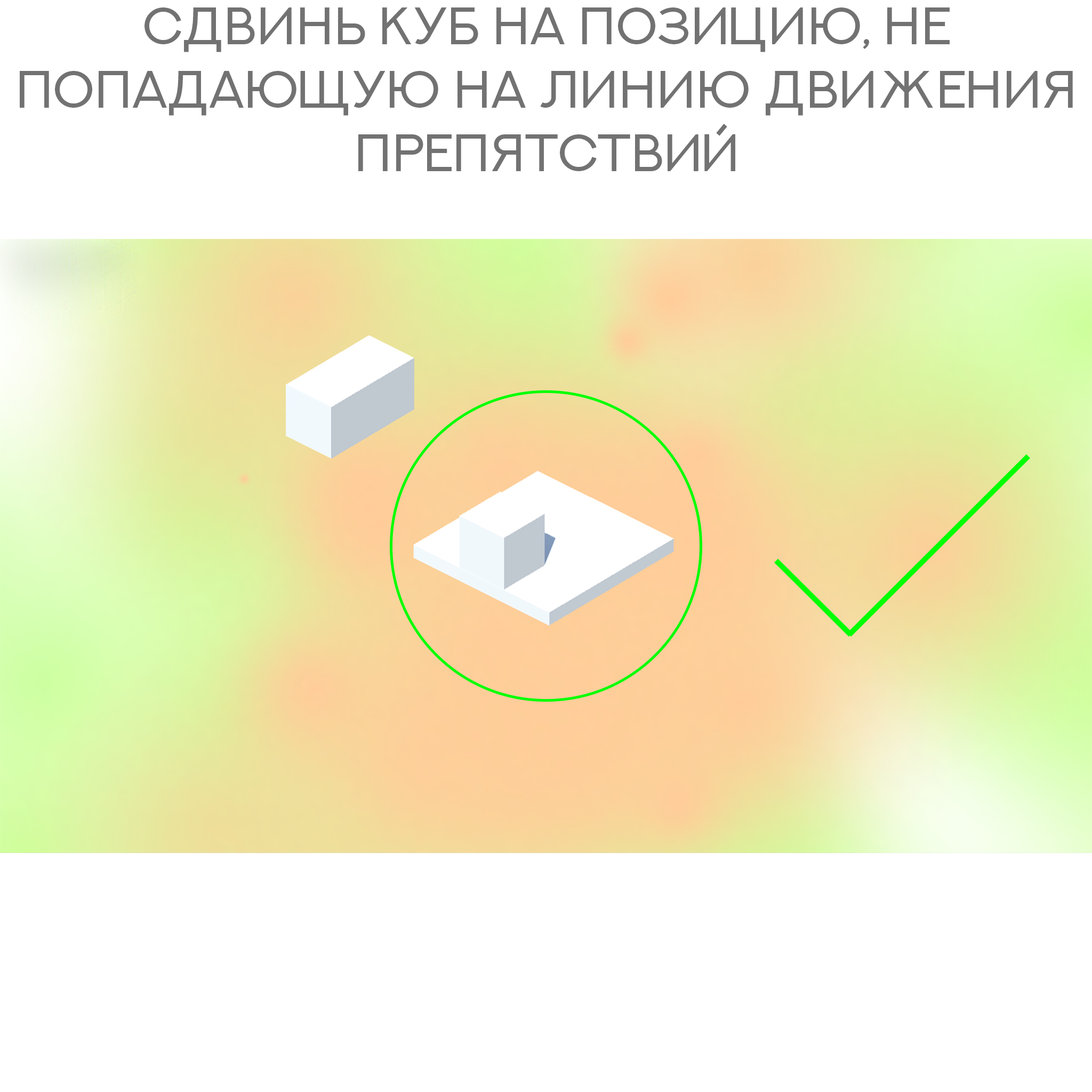
<style>
.page{position:relative;width:1092px;height:1092px;background:#ffffff}
.page>*{position:absolute;margin:0}
.t1{font:52.8px "NEXTART-Regular";color:#727272}
</style>
<div class="page">
<p class="t1" style="left:20px;top:7px;width:1053px;height:164px;text-align:center">сдвинь куб на позицию, не попадающую на линию движения препятствий</p>
</div>
